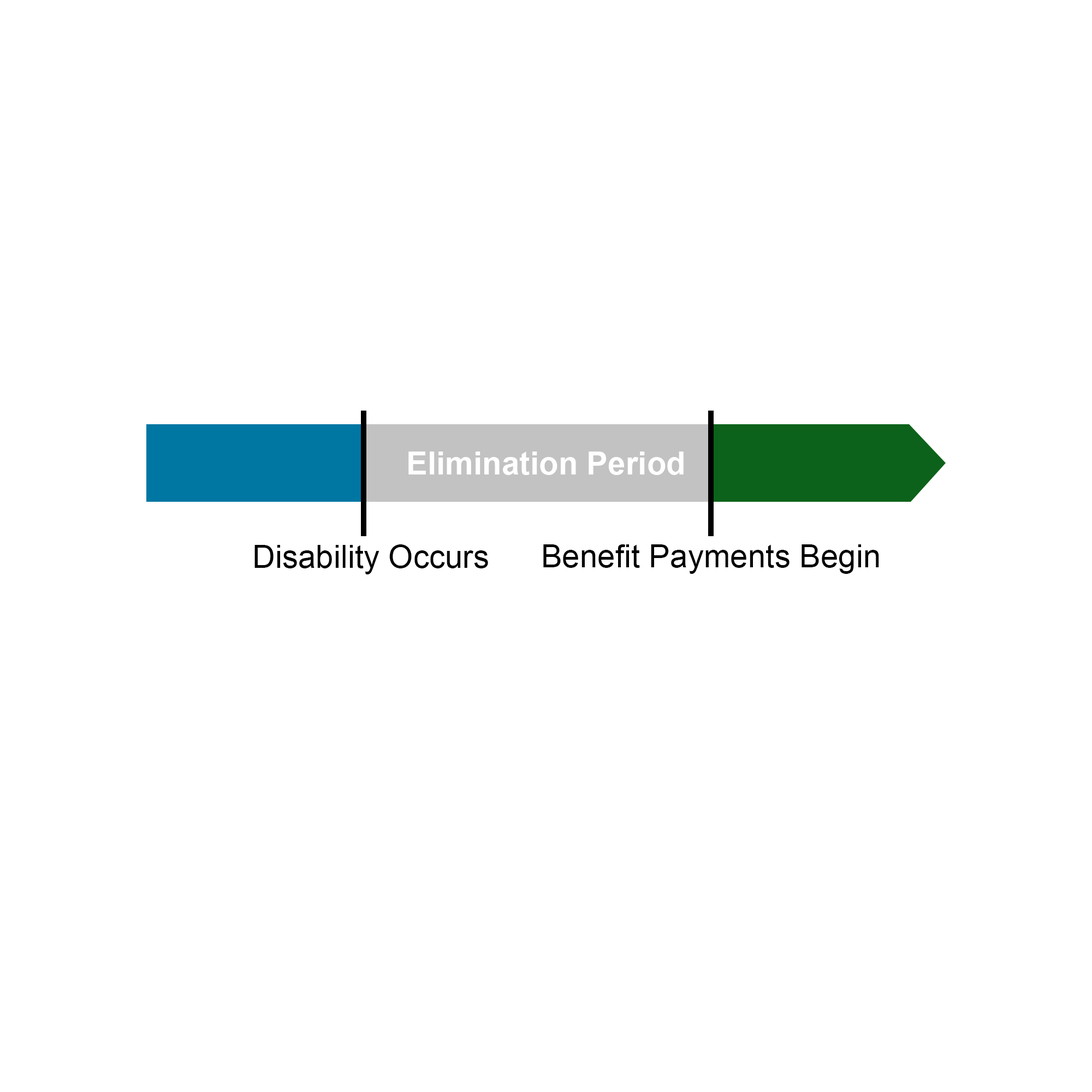
<style>
.page{position:relative;width:1092px;height:1092px;background:#ffffff}
.page>*{position:absolute;margin:0}
.t1{font:31.8px "Arial-BoldMT";color:#ffffff}
.t2{font:31.8px "ArialMT";color:#000000}
</style>
<div class="page">
<p class="t1" style="left:408px;top:452px;width:276px;height:23px">Elimination Period</p>
<p class="t2" style="left:254px;top:544px;width:234px;height:30px">Disability Occurs</p>
<p class="t2" style="left:543px;top:544px;width:336px;height:30px">Benefit Payments Begin</p>
</div>
